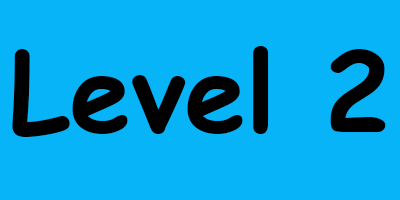
<style>
.page{position:relative;width:400px;height:200px;background:#07b4f8}
.page>*{position:absolute;margin:0}
.t1{font:110px "ComicSansMS-Bold";color:#000000}
</style>
<div class="page">
<p class="t1" style="left:12px;top:46px;width:374px;height:91px">Level 2</p>
</div>
